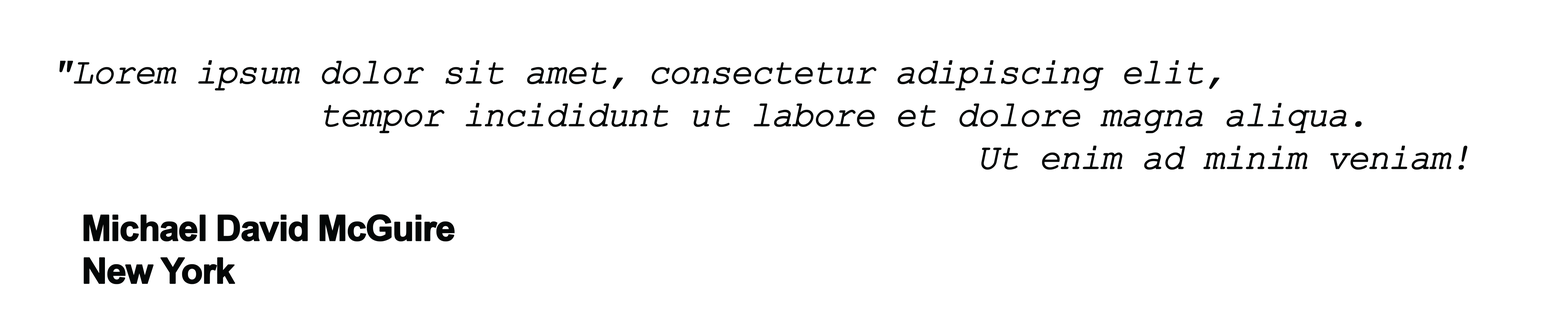
<style>
.page{position:relative;width:1568px;height:315px;background:#ffffff}
.page>*{position:absolute;margin:0}
.t1{font:35.6px "CourierNewPS-ItalicMT";letter-spacing:-0.05em;color:#040707;font-weight:bold}
.t2{font:35.6px "Arial-BoldMT";letter-spacing:-0.05em;color:#040707;font-weight:bold}
</style>
<div class="page">
<p class="t1" style="left:59px;top:60px;width:1408px;height:110px">"Lorem ipsum dolor sit amet, consectetur adipiscing elit, <br>             tempor incididunt ut labore et dolore magna aliqua. <br>                                             Ut enim ad minim veniam!</p>
<p class="t2" style="left:84px;top:214px;width:371px;height:71px">Michael David McGuire<br>New York</p>
</div>
